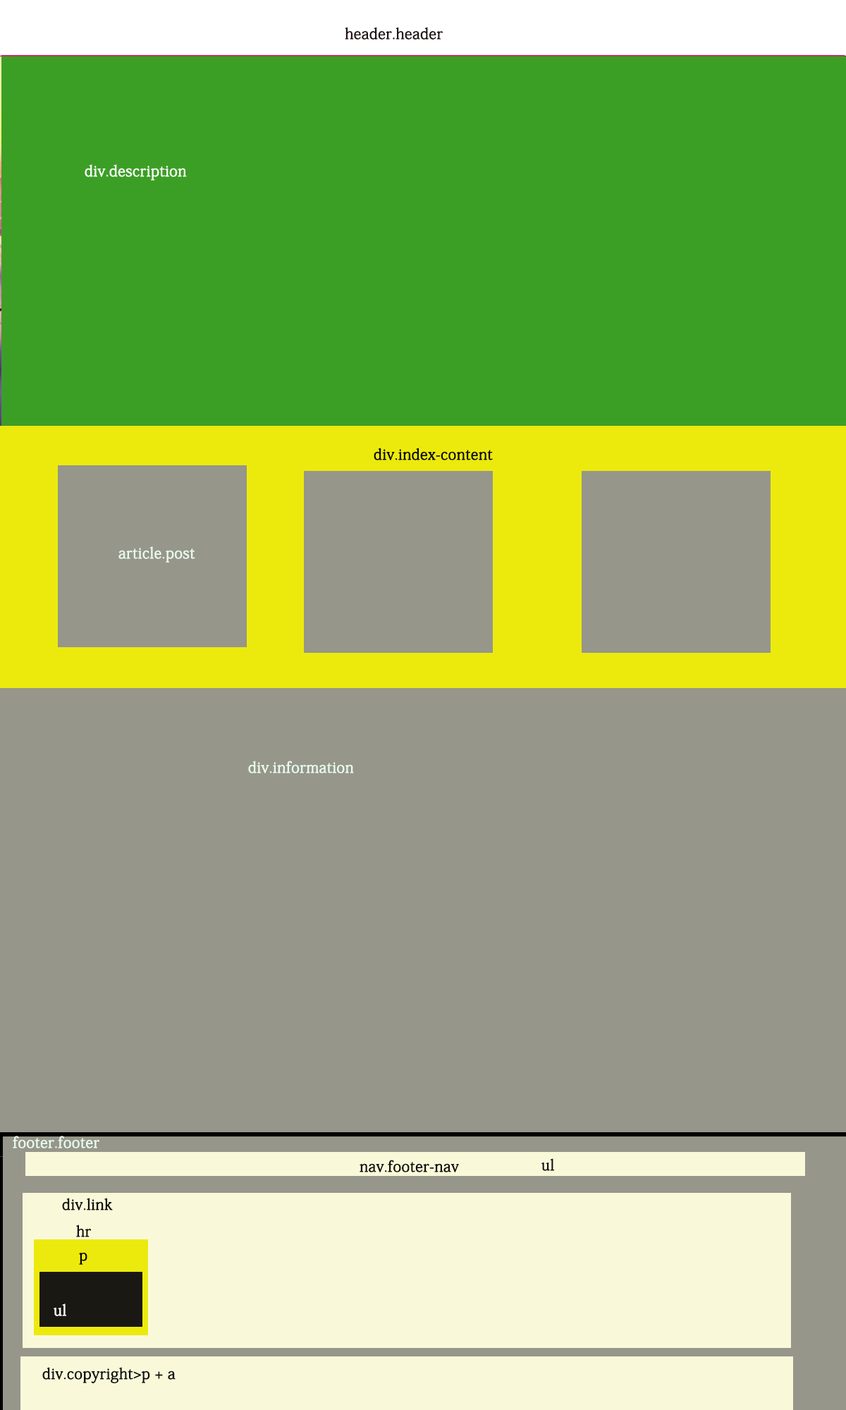
<style>
.page{position:relative;width:846px;height:1410px;background:#96968a}
.page>*{position:absolute;margin:0}
.t1{font:25.4px "AdobeFangsongStd-Regular";color:#211414;font-weight:bold}
.t2{font:25.4px "AdobeFangsongStd-Regular";color:#f4fcf2;font-weight:bold}
.t3{font:25.4px "AdobeFangsongStd-Regular";color:#090909;font-weight:bold}
.t4{font:25.4px "AdobeFangsongStd-Regular";color:#e8faee;font-weight:bold}
.t5{font:25.4px "AdobeFangsongStd-Regular";color:#0f0f0d;font-weight:bold}
.t6{font:25.4px "AdobeFangsongStd-Regular";color:#050505;font-weight:bold}
.t7{font:25.4px "AdobeFangsongStd-Regular";color:#fbfbf4;font-weight:bold}
</style>
<div class="page">
<p class="t1" style="left:345px;top:27px;width:98px;height:12px">header.header</p>
<p class="t2" style="left:85px;top:164px;width:102px;height:16px">div.description</p>
<p class="t3" style="left:374px;top:448px;width:119px;height:12px">div.index-content</p>
<p class="t4" style="left:118px;top:546px;width:77px;height:16px">article.post</p>
<p class="t4" style="left:248px;top:761px;width:106px;height:12px">div.information</p>
<p class="t4" style="left:13px;top:1136px;width:86px;height:12px">footer.footer</p>
<p class="t5" style="left:359px;top:1160px;width:100px;height:12px">nav.footer-nav</p>
<p class="t5" style="left:541px;top:1158px;width:13px;height:13px">ul</p>
<p class="t5" style="left:62px;top:1198px;width:51px;height:12px">div.link</p>
<p class="t5" style="left:76px;top:1224px;width:16px;height:13px">hr</p>
<p class="t6" style="left:79px;top:1252px;width:8px;height:13px">p</p>
<p class="t7" style="left:54px;top:1303px;width:12px;height:13px">ul</p>
<p class="t5" style="left:42px;top:1367px;width:134px;height:16px">div.copyright&gt;p + a</p>
</div>
